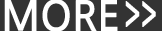
<style>
.page{position:relative;width:162px;height:31px;background:#333333}
.page>*{position:absolute;margin:0}
.t1{font:41.5px "NanumGothicBold";letter-spacing:-0.01em;color:#ffffff}
.t2{font:44.2px "NanumSquareB";letter-spacing:-0.02em;color:#ffffff;font-weight:bold;scale:0.61 1}
</style>
<div class="page">
<p class="t1" style="left:4px;top:0px;width:152px;height:32px">MORE <span class="t2">&gt;&gt;</span></p>
</div>
